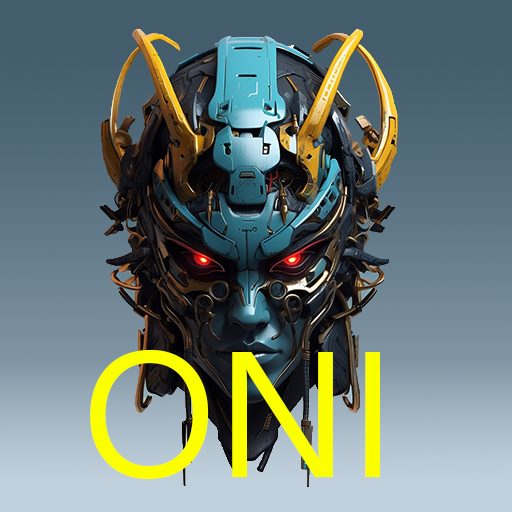
<style>
.page{position:relative;width:512px;height:512px}
.page>*{position:absolute;margin:0}
.t1{font:178px "SegoeUI";color:#fcff00}
</style>
<div class="page">
<p class="t1" style="left:90px;top:350px;width:290px;height:129px">ONI</p>
</div>
